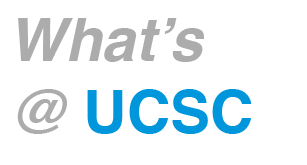
<style>
.page{position:relative;width:307px;height:165px;background:#ffffff}
.page>*{position:absolute;margin:0}
.t1{font:60px "Helvetica-BoldOblique";color:#acacac}
.t2{font:60px "Helvetica-Bold";color:#0096db}
</style>
<div class="page">
<p class="t1" style="left:17px;top:18px;width:235px;height:116px">What’s<br>@ <span class="t2">UCSC</span></p>
</div>
